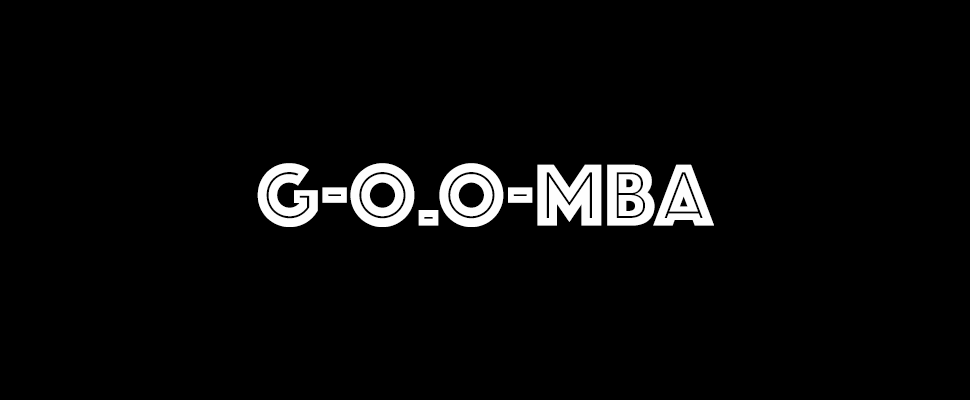
<style>
.page{position:relative;width:970px;height:400px;background:#000000}
.page>*{position:absolute;margin:0}
.t1{font:90.8px "Phosphate-Inline";color:#fefefe}
</style>
<div class="page">
<p class="t1" style="left:257px;top:163px;width:457px;height:64px">G-o.O-mbA</p>
</div>
